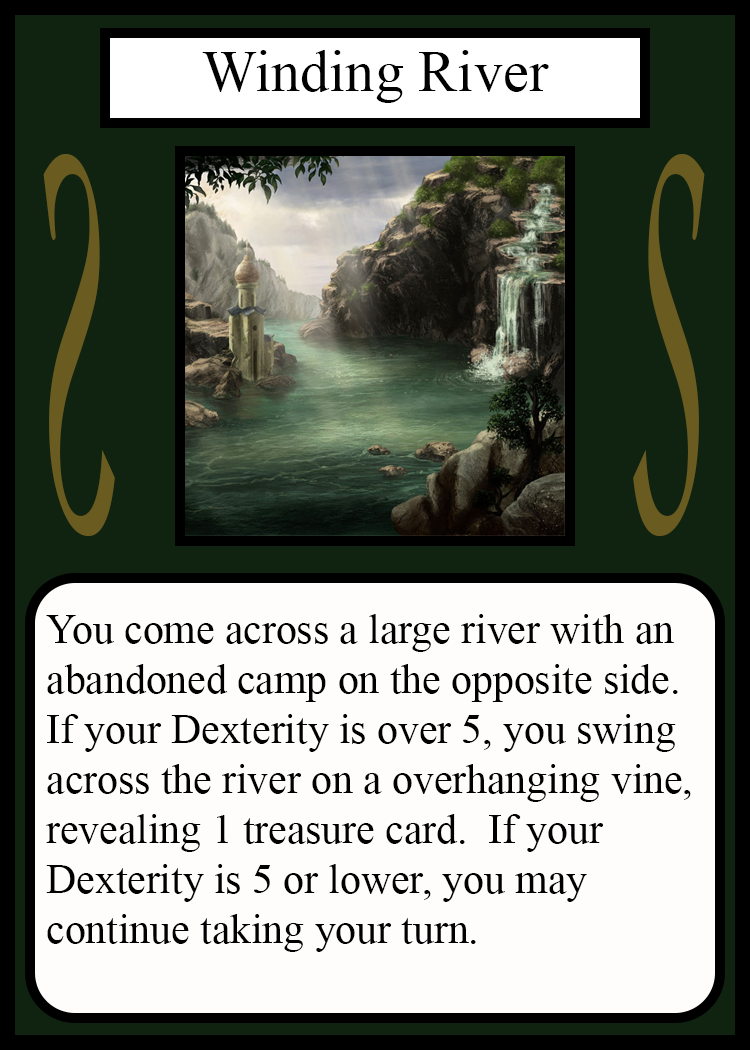
<style>
.page{position:relative;width:750px;height:1050px;background:#fffcfc}
.page>*{position:absolute;margin:0}
.t1{font:58.3px "TimesNewRomanPSMT";color:#010101}
.t2{font:548.5px "Apple-Chancery";color:#6a5c21;scale:0.27 1}
.t3{font:548.2px "Apple-Chancery";color:#6a5c21;scale:0.27 1}
.t4{font:41.7px "TimesNewRomanPSMT";color:#000000}
</style>
<div class="page">
<p class="t1" style="left:202px;top:50px;width:347px;height:53px">Winding River</p>
<p class="t2" style="left:43px;top:154px;width:72px;height:382px;rotate:180deg">S</p>
<p class="t3" style="left:633px;top:154px;width:72px;height:382px">S</p>
<p class="t4" style="left:46px;top:614px;width:645px;height:338px">You come across a large river with an<br>abandoned camp on the opposite side.<br>If your Dexterity is over 5, you swing<br>across the river on a overhanging vine,<br>revealing 1 treasure card.  If your<br>Dexterity is 5 or lower, you may <br>continue taking your turn.</p>
</div>
